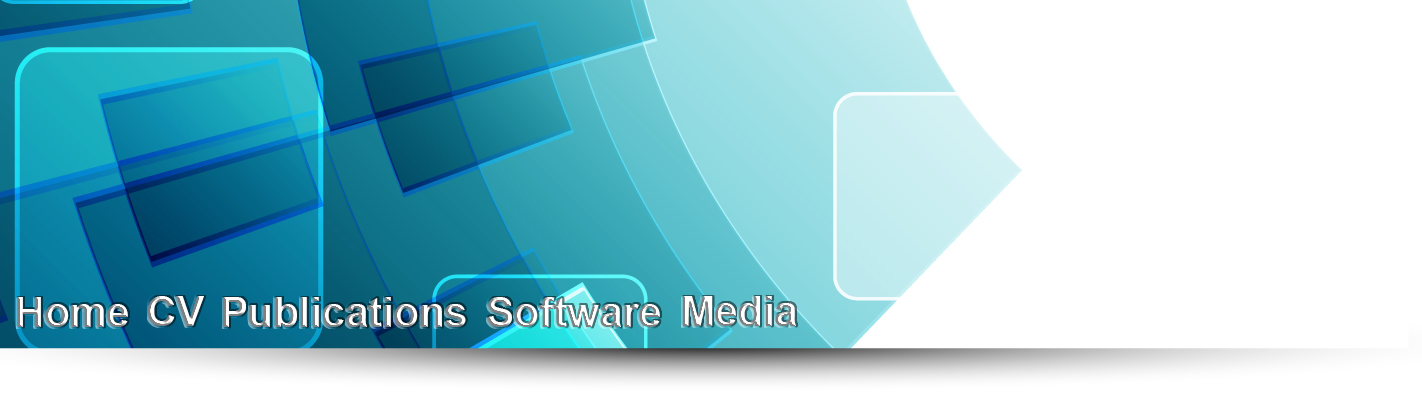
<style>
.page{position:relative;width:1422px;height:396px;background:#ffffff}
.page>*{position:absolute;margin:0}
.t1{font:41.7px "Arial-BoldMT"}
</style>
<div class="page">
<p class="t1" style="left:17px;top:297px;width:111px;height:30px">Home</p>
<p class="t1" style="left:148px;top:296px;width:56px;height:30px">CV</p>
<p class="t1" style="left:223px;top:297px;width:243px;height:30px">Publications</p>
<p class="t1" style="left:487px;top:297px;width:173px;height:30px">Software</p>
<p class="t1" style="left:682px;top:296px;width:114px;height:30px">Media</p>
</div>
